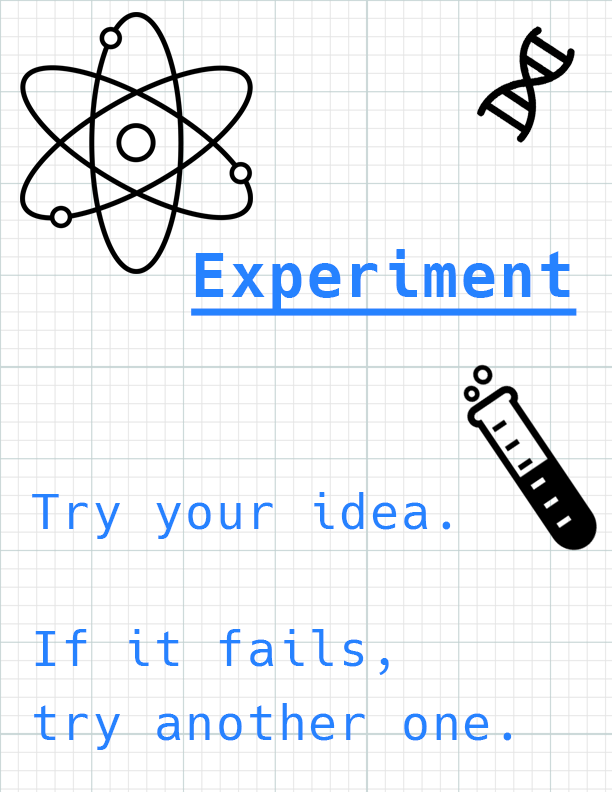
<style>
.page{position:relative;width:612px;height:792px;background:#ffffff}
.page>*{position:absolute;margin:0}
.t1{font:60px "Hack-Bold";letter-spacing:0.04em;color:#2682ff;text-decoration:underline}
.t2{font:48px/10.6px "Hack";letter-spacing:0.04em;color:#2682ff}
</style>
<div class="page">
<p class="t1" style="left:191px;top:249px;width:386px;height:67px">Experiment</p>
<p class="t2" style="left:32px;top:492px;width:480px;height:258px">Try your idea.<br><br><br><br><br><br><br><br><br><br><br><br><br>If it fails,<br><br><br><br><br><br><br>try another one.</p>
</div>
